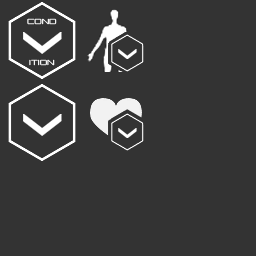
<style>
.page{position:relative;width:256px;height:256px;background:#333333}
.page>*{position:absolute;margin:0}
.t1{font:7.1px "Orbitron-Regular";scale:1.25 1}
.t2{font:7.1px "Orbitron-Regular";color:#ffffff;scale:1.25 1}
</style>
<div class="page">
<p class="t1" style="left:27px;top:18px;width:30px;height:7px">COND</p>
<p class="t2" style="left:29px;top:59px;width:26px;height:7px">ITION</p>
</div>
